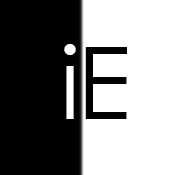
<style>
.page{position:relative;width:188px;height:175px;background:#ffffff}
.page>*{position:absolute;margin:0}
.t1{font:100px "CenturyGothic";letter-spacing:-0.03em;color:#ffffff}
.t2{font:100px "CenturyGothic";letter-spacing:-0.03em;color:#000000}
</style>
<div class="page">
<p class="t1" style="left:64px;top:44px;width:63px;height:75px">i<span class="t2">E</span></p>
</div>
